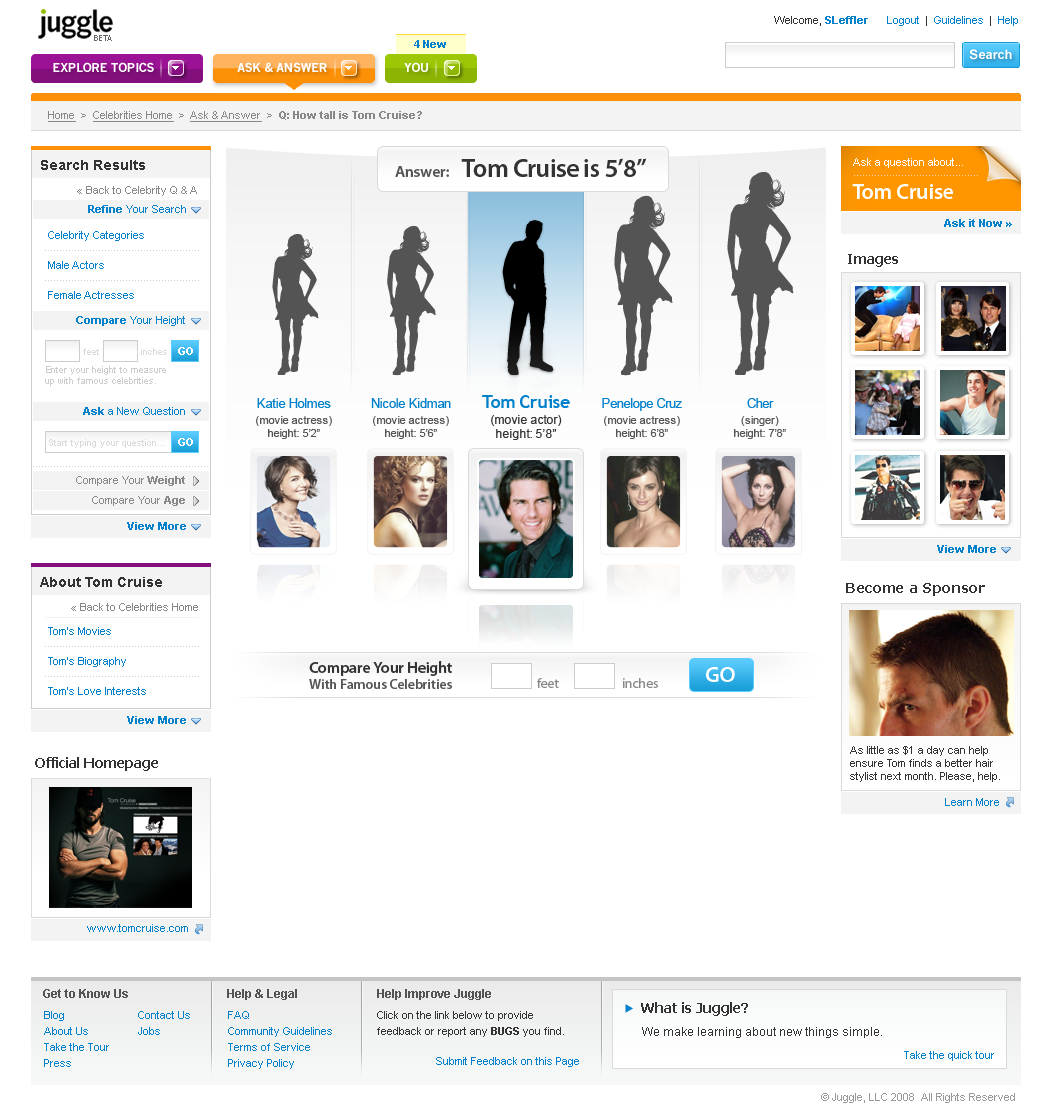
<style>
.page{position:relative;width:1050px;height:1106px;background:#ffffff}
.page>*{position:absolute;margin:0}
.t1{font:11px "Arial-BoldMT";color:#898888}
.t2{font:11px "ArialMT";color:#898888;text-decoration:underline}
.t3{font:11px "ArialMT";color:#898888}
.t4{font:14px "Arial-BoldMT";color:#333333}
.t5{font:26px "MyriadPro-Semibold";letter-spacing:-0.025em;color:#333333}
.t6{font:16px "MyriadPro-Semibold";letter-spacing:-0.015em;color:#555454}
.t7{font:22px "MyriadPro-Semibold";letter-spacing:-0.025em;color:#ffffff}
.t8{font:11px "ArialMT";color:#0181cc}
.t9{font:11px "Arial-BoldMT";color:#0181cc}
.t10{font:11px/30px "ArialMT";color:#0181cc}
.t11{font:9px "ArialMT";color:#dadada}
.t12{font:11px "Arial-BoldMT";color:#ffffff}
.t13{font:9px/11px "ArialMT";color:#cdcdcd}
.t14{font:11px/16px "ArialMT";color:#555454}
.t15{font:13px "ArialMT";letter-spacing:-0.025em;color:#0181cc}
.t16{font:11px "ArialMT";color:#555454}
.t17{font:12px/16px "ArialMT";color:#333333}
.t18{font:18px "TrebuchetMS-Bold";letter-spacing:-0.025em;color:#0181cc}
.t19{font:12px "ArialMT";color:#333333}
.t20{font:14px "Verdana-Bold";letter-spacing:-0.025em;color:#333333}
.t21{font:14px/16px "MyriadPro-Semibold";letter-spacing:-0.015em;color:#555454}
.t22{font:16px "MyriadPro-Semibold";letter-spacing:-0.015em;color:#333333}
.t23{font:14px "MyriadPro-Regular";letter-spacing:-0.015em;color:#898888}
.t24{font:22px "MyriadPro-Semibold";letter-spacing:-0.015em;color:#ffffff}
.t25{font:11px "ArialMT";color:#333333}
</style>
<div class="page">
<p class="t1" style="left:48px;top:111px;width:374px;height:11px"><span class="t2">Home</span><span class="t3">  &gt;  </span><span class="t2">Celebrities Home</span><span class="t3">  &gt;  </span><span class="t2">Ask &amp; Answer</span><span class="t3">  &gt;  </span>Q: How tall is Tom Cruise?</p>
<p class="t4" style="left:41px;top:160px;width:104px;height:10px">Search Results</p>
<p class="t5" style="left:395px;top:158px;width:252px;height:19px"><span class="t6">Answer:</span>   Tom Cruise is 5’8”</p>
<p class="t7" style="left:852px;top:184px;width:101px;height:15px">Tom Cruise</p>
<p class="t3" style="left:86px;top:186px;width:111px;height:10px">Back to Celebrity Q &amp; A</p>
<p class="t8" style="left:88px;top:205px;width:98px;height:8px"><span class="t9">Refine </span>Your Search</p>
<p class="t10" style="left:48px;top:231px;width:96px;height:68px"><span class="t8">Celebrity Categories<br></span>Male Actors<br>Female Actresses</p>
<p class="t8" style="left:76px;top:316px;width:109px;height:10px"><span class="t9">Compare</span> Your Height</p>
<p class="t11" style="left:83px;top:348px;width:16px;height:7px">feet</p>
<p class="t11" style="left:141px;top:348px;width:26px;height:7px">inches</p>
<p class="t12" style="left:178px;top:347px;width:15px;height:8px">GO</p>
<p class="t13" style="left:45px;top:366px;width:121px;height:20px">Enter your height to measure <br>up with famous celebrities.</p>
<p class="t14" style="left:256px;top:398px;width:76px;height:41px;text-align:center"><span class="t15">Katie Holmes<br></span>(movie actress)<br><span class="t16">height: 5’2”</span></p>
<p class="t14" style="left:371px;top:398px;width:80px;height:41px;text-align:center"><span class="t15">Nicole Kidman<br></span>(movie actress)<br><span class="t16">height: 5’6”</span></p>
<p class="t17" style="left:482px;top:395px;width:88px;height:45px;text-align:center"><span class="t18">Tom Cruise<br></span>(movie actor)<br><span class="t19">height: 5’8”</span></p>
<p class="t14" style="left:602px;top:398px;width:80px;height:41px;text-align:center"><span class="t15">Penelope Cruz<br></span>(movie actress)<br><span class="t16">height: 6’8”</span></p>
<p class="t16" style="left:734px;top:398px;width:52px;height:41px;text-align:center"><span class="t15">Cher<br></span><span class="t14">(singer)<br></span>height: 7’8”</p>
<p class="t8" style="left:83px;top:407px;width:102px;height:8px"><span class="t9">Ask</span> a New Question</p>
<p class="t12" style="left:178px;top:438px;width:15px;height:8px">GO</p>
<p class="t11" style="left:49px;top:439px;width:116px;height:9px">Start typing your question...</p>
<p class="t3" style="left:76px;top:476px;width:109px;height:10px">Compare Your <span class="t1">Weight</span></p>
<p class="t3" style="left:92px;top:496px;width:93px;height:10px">Compare Your <span class="t1">Age</span></p>
<p class="t4" style="left:40px;top:577px;width:122px;height:10px">About Tom Cruise</p>
<p class="t20" style="left:846px;top:583px;width:139px;height:13px">Become a Sponsor</p>
<p class="t3" style="left:80px;top:603px;width:118px;height:8px">Back to Celebrities Home</p>
<p class="t10" style="left:48px;top:627px;width:98px;height:68px"><span class="t8">Tom’s Movies<br></span>Tom’s Biography<br>Tom’s Love Interests</p>
<p class="t21" style="left:309px;top:661px;width:143px;height:28px"><span class="t22">Compare Your Height<br></span>With Famous Celebrities</p>
<p class="t23" style="left:537px;top:678px;width:22px;height:10px">feet</p>
<p class="t23" style="left:623px;top:678px;width:35px;height:10px">inches</p>
<p class="t24" style="left:706px;top:667px;width:29px;height:15px">GO</p>
<p class="t25" style="left:850px;top:746px;width:150px;height:36px">As little as $1 a day can help<br>ensure Tom finds a better hair<br>stylist next month. Please, help.</p>
<p class="t8" style="left:87px;top:924px;width:101px;height:8px">www.tomcruise.com</p>
</div>
